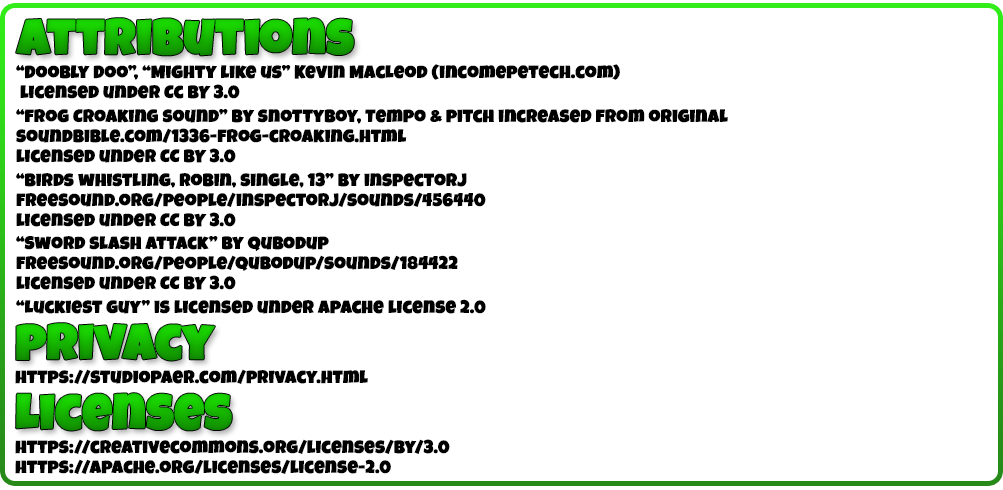
<style>
.page{position:relative;width:1003px;height:490px;background:#ffffff}
.page>*{position:absolute;margin:0}
.t1{font:50px "LuckiestGuy-Regular";font-weight:bold}
.t2{font:18px/20px "LuckiestGuy-Regular";color:#000000;font-weight:bold}
.t3{font:18px "LuckiestGuy-Regular";color:#000000;font-weight:bold}
</style>
<div class="page">
<p class="t1" style="left:16px;top:18px;width:338px;height:38px">attributions</p>
<p class="t2" style="left:16px;top:64px;width:604px;height:35px">“Doobly Doo”, “Mighty like us” Kevin MacLeod (incomepetech.com)<br> licensed under Cc BY 3.0</p>
<p class="t2" style="left:16px;top:109px;width:712px;height:54px">“frog Croaking sound” by snottyboy, Tempo &amp; pitch increased from original<br>soundbible.com/1336-frog-croaking.html<br>licensed under CC BY 3.0</p>
<p class="t2" style="left:16px;top:172px;width:470px;height:55px">“Birds whistling, robin, single, 13” by inspectorj<br>freesound.org/people/inspectorj/sounds/456440<br>licensed under CC BY 3.0</p>
<p class="t2" style="left:16px;top:236px;width:442px;height:54px">“Sword slash attack” by qubodup<br>freesound.org/people/qubodup/sounds/184422<br>licensed under CC BY 3.0</p>
<p class="t3" style="left:16px;top:299px;width:470px;height:15px">“Luckiest guy” is licensed under apache license 2.0</p>
<p class="t1" style="left:16px;top:323px;width:199px;height:38px">privacy</p>
<p class="t3" style="left:15px;top:369px;width:353px;height:15px">https://studiopaer.com/privacy.html</p>
<p class="t1" style="left:16px;top:393px;width:216px;height:38px">Licenses</p>
<p class="t2" style="left:15px;top:439px;width:435px;height:35px">https://creativecommons.org/licenses/by/3.0<br>https://apache.org/licenses/license-2.0</p>
</div>
